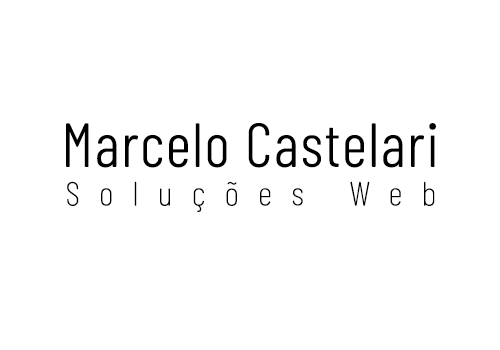
<style>
.page{position:relative;width:500px;height:350px;background:#ffffff}
.page>*{position:absolute;margin:0}
.t1{font:61.4px "BarlowCondensed-Light";color:#000000;font-weight:bold}
.t2{font:33.5px "BarlowCondensed-Thin";letter-spacing:0.51em;color:#000000;font-weight:bold;scale:1.07 1}
</style>
<div class="page">
<p class="t1" style="left:66px;top:123px;width:370px;height:45px">Marcelo Castelari</p>
<p class="t2" style="left:67px;top:181px;width:368px;height:31px">Soluções Web</p>
</div>
